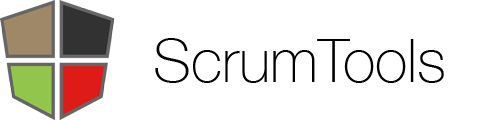
<style>
.page{position:relative;width:499px;height:120px;background:#ffffff}
.page>*{position:absolute;margin:0}
.t1{font:60px "HelveticaNeue-Thin";color:#000000}
</style>
<div class="page">
<p class="t1" style="left:155px;top:38px;width:289px;height:45px">ScrumTools</p>
</div>
